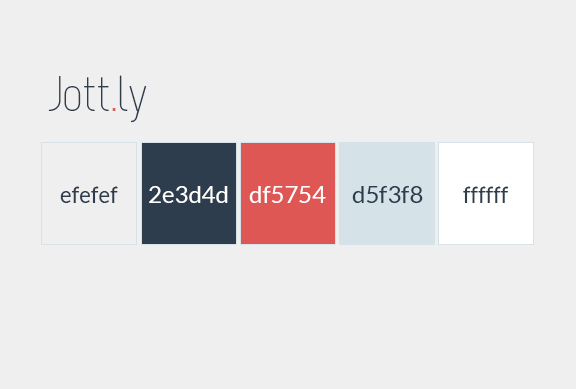
<style>
.page{position:relative;width:576px;height:389px;background:#efefef}
.page>*{position:absolute;margin:0}
.t1{font:50px "Melbourne-Light";letter-spacing:-0.025em;color:#2e3d4d}
.t2{font:50px "Melbourne-Light";letter-spacing:-0.025em;color:#df5754}
.t3{font:24px "Lato-Regular";color:#2e3d4d;scale:0.93 1}
.t4{font:24px "Lato-Regular";color:#ffffff}
.t5{font:24px "Lato-Regular";color:#2e3d4d}
</style>
<div class="page">
<p class="t1" style="left:48px;top:75px;width:99px;height:48px">Jott<span class="t2">.</span>ly</p>
<p class="t3" style="left:60px;top:186px;width:58px;height:17px">efefef</p>
<p class="t4" style="left:149px;top:186px;width:79px;height:17px">2e3d4d</p>
<p class="t4" style="left:249px;top:186px;width:77px;height:17px">df5754</p>
<p class="t5" style="left:352px;top:186px;width:71px;height:17px">d5f3f8</p>
<p class="t3" style="left:463px;top:186px;width:46px;height:17px">ffffff</p>
</div>
